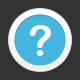
<style>
.page{position:relative;width:80px;height:80px;background:#333333}
.page>*{position:absolute;margin:0}
.t1{font:43px "ArialRoundedMTBold";color:#fafafa}
</style>
<div class="page">
<p class="t1" style="left:29px;top:25px;width:22px;height:31px">?</p>
</div>
